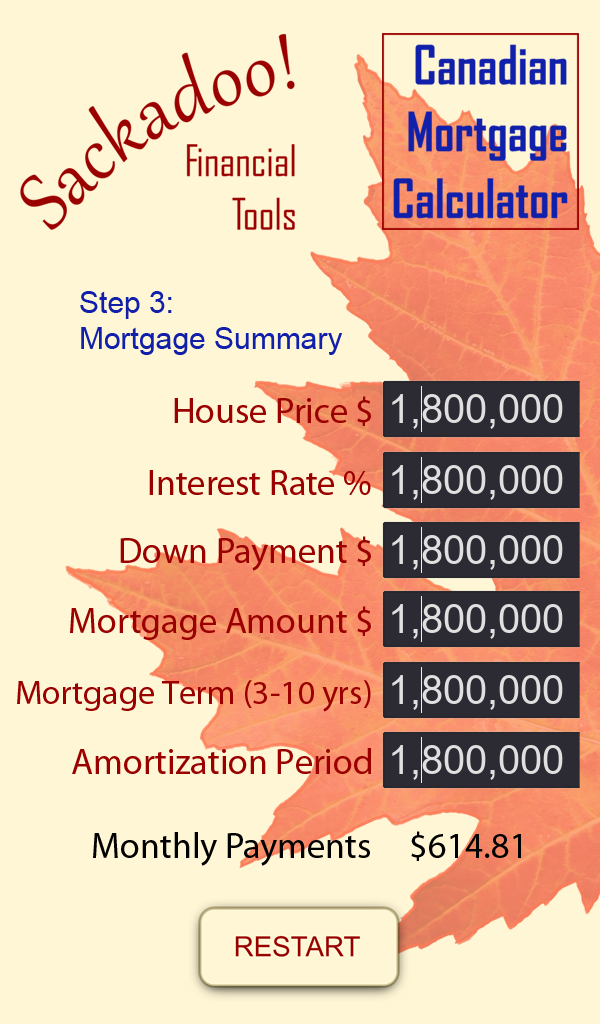
<style>
.page{position:relative;width:600px;height:1024px;background:#fff6d5}
.page>*{position:absolute;margin:0}
.t1{font:30px "ArialMT";color:#1120ab}
.t2{font:36px "MyriadPro-Regular";color:#9a0101}
.t3{font:36px "MyriadPro-Regular";color:#9a0000}
.t4{font:34px "MyriadPro-Regular";color:#9a0000}
.t5{font:36px "MyriadPro-Regular";color:#010101}
</style>
<div class="page">
<p class="t1" style="left:80px;top:291px;width:263px;height:64px">Step 3:<br>Mortgage Summary</p>
<p class="t2" style="left:174px;top:396px;width:197px;height:30px">House Price $</p>
<p class="t3" style="left:149px;top:470px;width:222px;height:25px">Interest Rate %</p>
<p class="t3" style="left:120px;top:536px;width:251px;height:35px">Down Payment $</p>
<p class="t3" style="left:70px;top:606px;width:301px;height:34px">Mortgage Amount $</p>
<p class="t4" style="left:17px;top:680px;width:354px;height:32px">Mortgage Term (3-10 yrs)</p>
<p class="t3" style="left:72px;top:748px;width:299px;height:26px">Amortization Period</p>
<p class="t5" style="left:93px;top:831px;width:428px;height:35px">Monthly Payments     $614.81</p>
</div>
